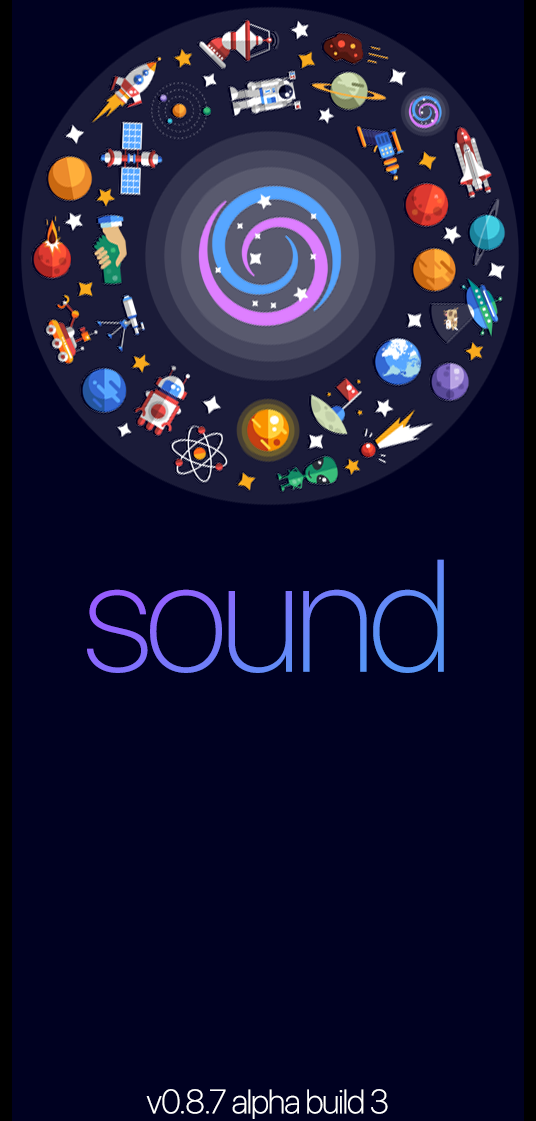
<style>
.page{position:relative;width:536px;height:1121px;background:#000121}
.page>*{position:absolute;margin:0}
.t1{font:158.3px "SFProDisplay-Thin";letter-spacing:-0.04em;color:#717bff}
.t2{font:33.3px "SFProDisplay-Thin";letter-spacing:-0.04em;color:#ffffff;font-weight:bold}
</style>
<div class="page">
<p class="t1" style="left:87px;top:559px;width:357px;height:114px">sound</p>
<p class="t2" style="left:146px;top:1089px;width:242px;height:30px">v0.8.7 alpha build 3</p>
</div>
